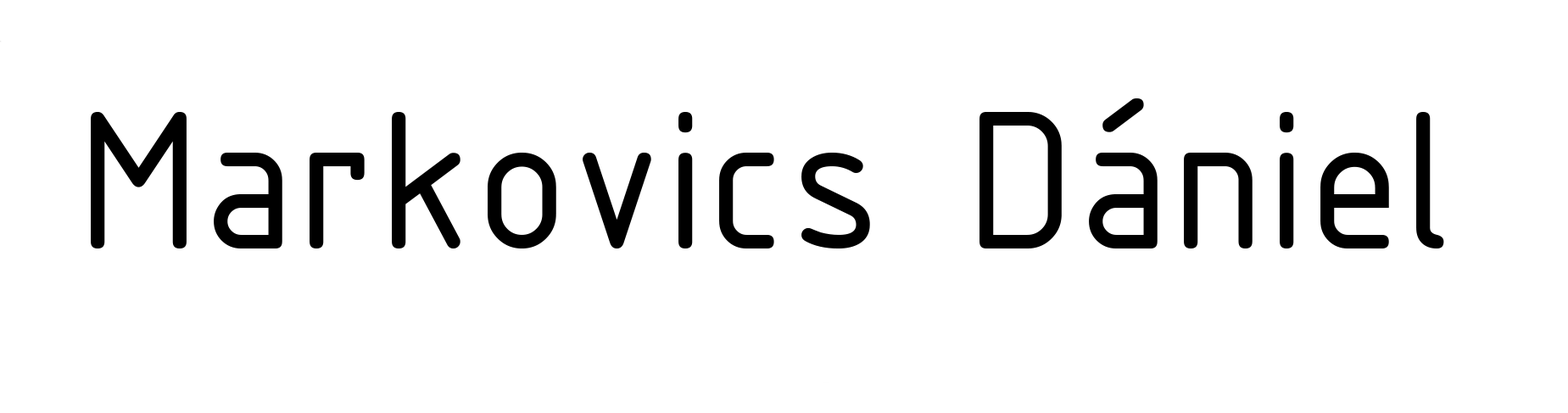
<style>
.page{position:relative;width:1568px;height:413px;background:#ffffff}
.page>*{position:absolute;margin:0}
.t1{font:212px "ISOCPEUR";color:#000000}
</style>
<div class="page">
<p class="t1" style="left:91px;top:98px;width:1353px;height:150px">Markovics Dániel</p>
</div>
